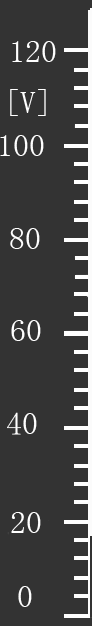
<style>
.page{position:relative;width:92px;height:626px;background:#333333}
.page>*{position:absolute;margin:0}
.t1{font:32px "SimSun";color:#ffffff}
</style>
<div class="page">
<p class="t1" style="left:12px;top:41px;width:44px;height:21px">120</p>
<p class="t1" style="left:10px;top:89px;width:36px;height:27px">[V]</p>
<p class="t1" style="left:0px;top:135px;width:44px;height:21px">100</p>
<p class="t1" style="left:10px;top:228px;width:30px;height:21px">80</p>
<p class="t1" style="left:11px;top:320px;width:30px;height:21px">60</p>
<p class="t1" style="left:7px;top:412px;width:30px;height:23px">40</p>
<p class="t1" style="left:11px;top:512px;width:30px;height:21px">20</p>
<p class="t1" style="left:18px;top:586px;width:14px;height:21px">0</p>
</div>
